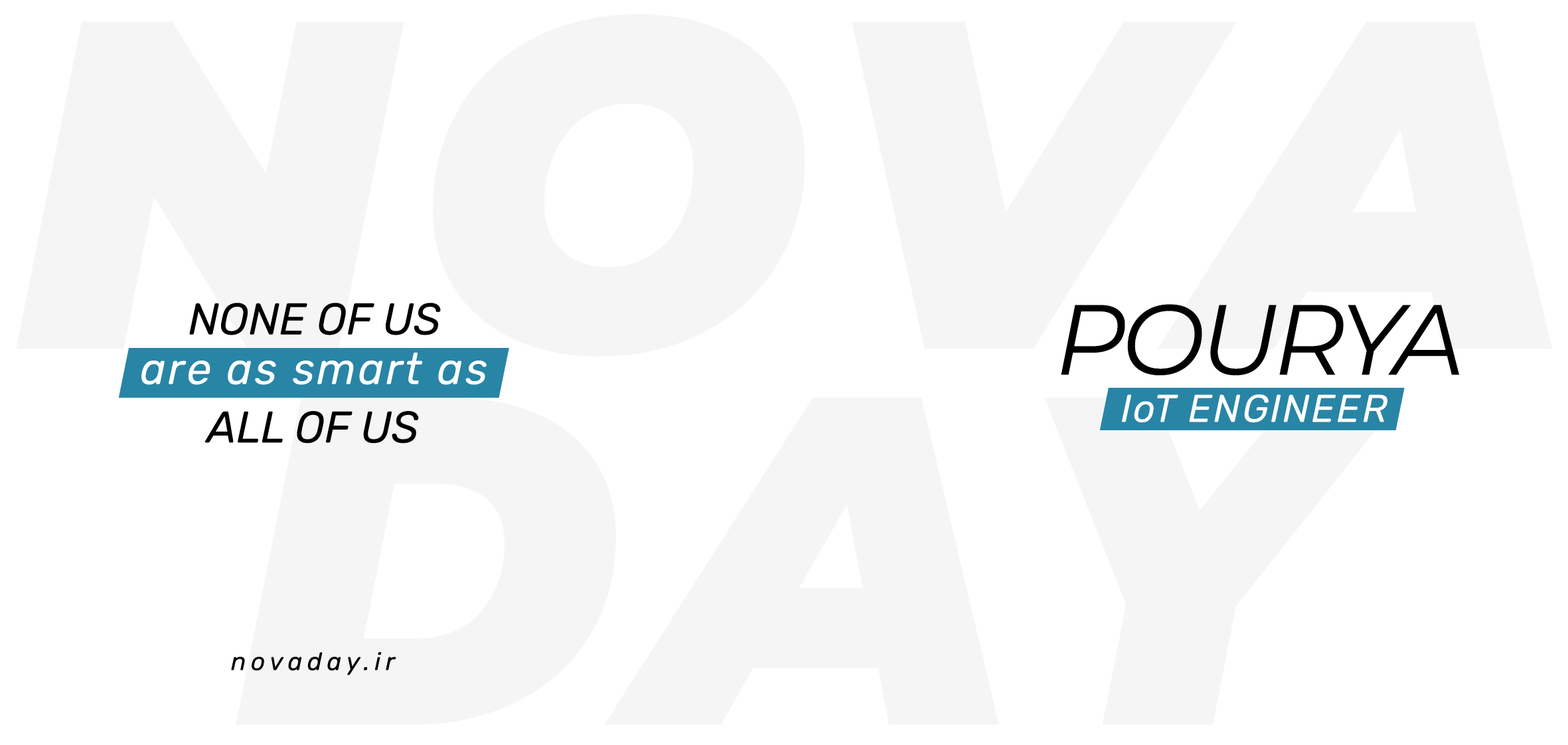
<style>
.page{position:relative;width:1568px;height:745px;background:#ffffff}
.page>*{position:absolute;margin:0}
.t1{font:44.3px "Rubik-Italic";color:#000000}
.t2{font:99.6px "Montserrat-Italic";letter-spacing:-0.05em;color:#000000}
.t3{font:44.3px "Rubik-Italic";letter-spacing:0.05em;color:#ffffff}
.t4{font:38.7px "Rubik-Italic";letter-spacing:0.05em;color:#ffffff}
.t5{font:24.9px "Rubik-Italic";letter-spacing:0.2em;color:#000000}
</style>
<div class="page">
<p class="t1" style="left:189px;top:303px;width:252px;height:32px">NONE OF US</p>
<p class="t2" style="left:1061px;top:304px;width:399px;height:72px">POURYA</p>
<p class="t3" style="left:141px;top:353px;width:346px;height:32px">are as smart as</p>
<p class="t4" style="left:1122px;top:394px;width:265px;height:29px">IoT ENGINEER</p>
<p class="t1" style="left:205px;top:411px;width:214px;height:32px">ALL OF US</p>
<p class="t5" style="left:231px;top:652px;width:165px;height:23px">novaday.ir</p>
</div>
